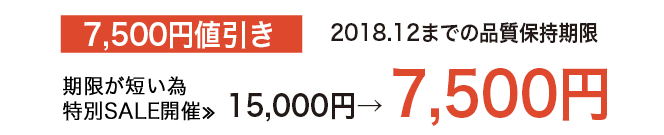
<style>
.page{position:relative;width:664px;height:135px;background:#ffffff}
.page>*{position:absolute;margin:0}
.t1{font:30px "HiraKakuPro-W6";color:#fffffe;scale:0.9 1}
.t2{font:22px "HiraKakuPro-W6";color:#221815;scale:0.9 1}
.t3{font:60px "HiraKakuPro-W6";color:#de482d;scale:0.9 1}
.t4{font:30px "HiraKakuPro-W6";color:#221815;scale:0.9 1}
</style>
<div class="page">
<p class="t1" style="left:84px;top:20px;width:188px;height:31px">7,500円値引き</p>
<p class="t2" style="left:331px;top:22px;width:267px;height:22px">2018.12までの品質保持期限</p>
<p class="t3" style="left:393px;top:68px;width:215px;height:58px">7,500円</p>
<p class="t4" style="left:230px;top:93px;width:152px;height:29px">15,000円→</p>
</div>
